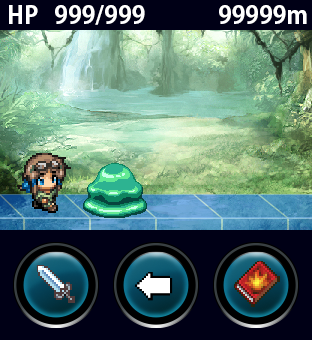
<style>
.page{position:relative;width:312px;height:340px;background:#000016}
.page>*{position:absolute;margin:0}
.t1{font:24px "KozGoPr6N-Bold";color:#ffffff}
</style>
<div class="page">
<p class="t1" style="left:9px;top:5px;width:298px;height:20px">HP   999/999              99999m</p>
</div>
